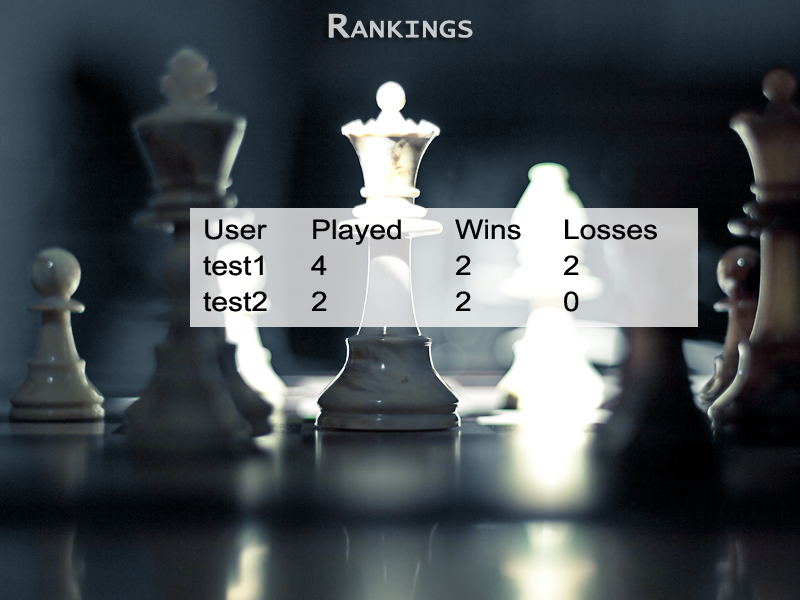
<style>
.page{position:relative;width:800px;height:600px}
.page>*{position:absolute;margin:0}
.t1{font:36px "LucidaConsole";color:#c7cacc;font-variant:small-caps;font-weight:bold;scale:1.11 1}
.t2{font:27px "ArialMT";color:#000000;scale:1.11 1}
</style>
<div class="page">
<p class="t1" style="left:328px;top:13px;width:145px;height:25px">Rankings</p>
<p class="t2" style="left:203px;top:219px;width:454px;height:93px">User  Played  Wins  Losses<br>test1  4    2   2<br>test2  2    2   0</p>
</div>
